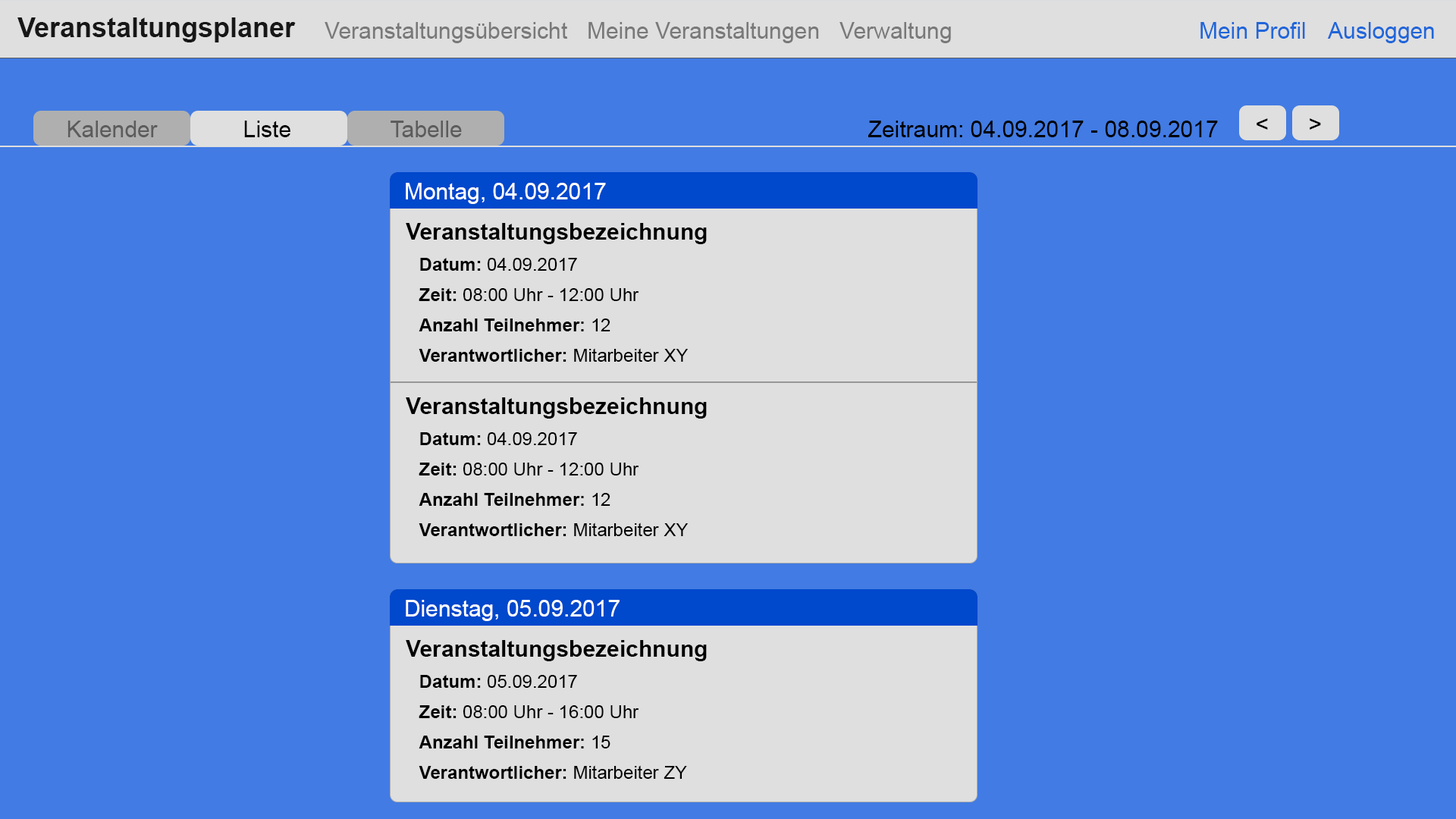
<style>
.page{position:relative;width:1456px;height:819px;background:#427be3}
.page>*{position:absolute;margin:0}
.t1{font:27.3px "Arial-BoldMT";color:#171717}
.t2{font:22.7px "ArialMT";color:#797979}
.t3{font:22.7px "ArialMT";color:#2066da}
.t4{font:22.7px "ArialMT";color:#5c5c5c}
.t5{font:22.7px "ArialMT";color:#000000}
.t6{font:22.7px "ArialMT";color:#ffffff}
.t7{font:22.7px "Arial-BoldMT";color:#000000}
.t8{font:18.2px/30.3px "ArialMT";color:#000000}
.t9{font:18.2px/30.3px "Arial-BoldMT";color:#000000}
</style>
<div class="page">
<p class="t1" style="left:17px;top:17px;width:279px;height:25px">Veranstaltungsplaner</p>
<p class="t2" style="left:325px;top:22px;width:242px;height:21px">Veranstaltungsübersicht</p>
<p class="t2" style="left:588px;top:22px;width:231px;height:21px">Meine Veranstaltungen</p>
<p class="t2" style="left:839px;top:22px;width:112px;height:21px">Verwaltung</p>
<p class="t3" style="left:1200px;top:22px;width:105px;height:17px">Mein Profil</p>
<p class="t3" style="left:1327px;top:22px;width:107px;height:21px">Ausloggen</p>
<p class="t4" style="left:67px;top:121px;width:91px;height:16px">Kalender</p>
<p class="t5" style="left:244px;top:121px;width:46px;height:16px">Liste</p>
<p class="t4" style="left:391px;top:121px;width:71px;height:16px">Tabelle</p>
<p class="t5" style="left:868px;top:121px;width:350px;height:16px">Zeitraum: 04.09.2017 - 08.09.2017</p>
<p class="t5" style="left:1257px;top:118px;width:11px;height:12px">&lt;</p>
<p class="t5" style="left:1310px;top:118px;width:11px;height:12px">&gt;</p>
<p class="t6" style="left:406px;top:183px;width:200px;height:21px">Montag, 04.09.2017</p>
<p class="t7" style="left:406px;top:223px;width:301px;height:21px">Veranstaltungsbezeichnung</p>
<p class="t8" style="left:419px;top:258px;width:269px;height:104px"><span class="t9">Datum: </span>04.09.2017<br><span class="t9">Zeit: </span>08:00 Uhr - 12:00 Uhr<br><span class="t9">Anzahl Teilnehmer: </span>12<br><span class="t9">Verantwortlicher: </span>Mitarbeiter XY</p>
<p class="t7" style="left:406px;top:397px;width:301px;height:22px">Veranstaltungsbezeichnung</p>
<p class="t8" style="left:419px;top:432px;width:269px;height:104px"><span class="t9">Datum: </span>04.09.2017<br><span class="t9">Zeit: </span>08:00 Uhr - 12:00 Uhr<br><span class="t9">Anzahl Teilnehmer: </span>12<br><span class="t9">Verantwortlicher: </span>Mitarbeiter XY</p>
<p class="t6" style="left:406px;top:600px;width:214px;height:21px">Dienstag, 05.09.2017</p>
<p class="t7" style="left:406px;top:640px;width:301px;height:21px">Veranstaltungsbezeichnung</p>
<p class="t8" style="left:419px;top:675px;width:268px;height:104px"><span class="t9">Datum: </span>05.09.2017<br><span class="t9">Zeit: </span>08:00 Uhr - 16:00 Uhr<br><span class="t9">Anzahl Teilnehmer: </span>15<br><span class="t9">Verantwortlicher: </span>Mitarbeiter ZY</p>
</div>
